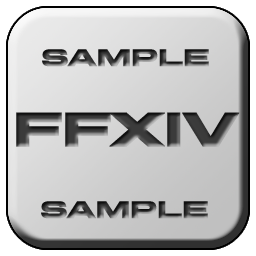
<style>
.page{position:relative;width:256px;height:256px}
.page>*{position:absolute;margin:0}
.t1{font:24px "MiedingerW01-Bold";font-weight:bold}
.t2{font:48px "MiedingerW01-Bold";color:#3b3b3b;font-weight:bold}
</style>
<div class="page">
<p class="t1" style="left:42px;top:49px;width:167px;height:18px">SAMPLE</p>
<p class="t2" style="left:16px;top:112px;width:224px;height:35px">FFXIV</p>
<p class="t1" style="left:41px;top:201px;width:167px;height:18px">SAMPLE</p>
</div>
